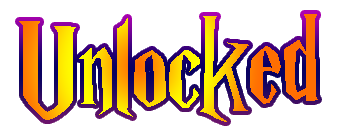
<style>
.page{position:relative;width:338px;height:135px;background:#ffffff}
.page>*{position:absolute;margin:0}
.t1{font:141px "HarryP";scale:0.86 1}
</style>
<div class="page">
<p class="t1" style="left:19px;top:14px;width:299px;height:108px">Unlocked</p>
</div>
